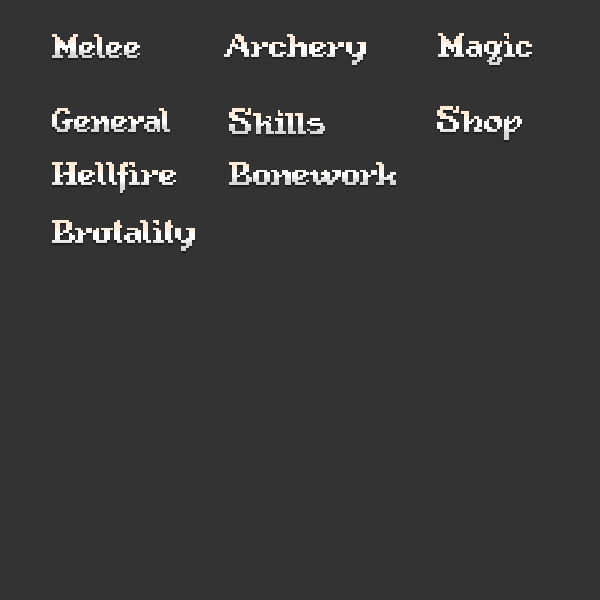
<style>
.page{position:relative;width:600px;height:600px;background:#333333}
.page>*{position:absolute;margin:0}
.t1{font:42.1px "InexpugnableExte";letter-spacing:-0.025em}
.t2{font:42.1px "InexpugnableExte";letter-spacing:-0.01em}
.t3{font:40.8px "InexpugnableExte";letter-spacing:-0.025em;color:#ffffff;scale:1.09 1}
.t4{font:40.8px "InexpugnableExte";letter-spacing:-0.005em;color:#ffffff;scale:1.09 1}
.t5{font:42.1px "InexpugnableExte"}
.t6{font:50.5px "RhymeExtended";letter-spacing:-0.01em;color:#ffffff}
.t7{font:42.1px "RhymeExtended";letter-spacing:-0.025em;color:#ffffff}
.t8{font:42.1px "RhymeExtended";letter-spacing:-0.005em;color:#ffffff}
.t9{font:42.1px "RhymeExtended";letter-spacing:-0.01em;color:#ffffff}
.t10{font:40.8px "InexpugnableExte";letter-spacing:-0.025em;scale:1.09 1}
</style>
<div class="page">
<p class="t1" style="left:52px;top:34px;width:88px;height:24px">Mel<span class="t2">e</span>e</p>
<p class="t3" style="left:224px;top:34px;width:142px;height:31px">Arc<span class="t4">h</span>e<span class="t4">r</span>y</p>
<p class="t2" style="left:438px;top:33px;width:94px;height:32px">M<span class="t5">a</span>gic</p>
<p class="t1" style="left:52px;top:108px;width:118px;height:24px">General</p>
<p class="t6" style="left:437px;top:106px;width:85px;height:34px">S<span class="t7">h</span><span class="t8">o</span><span class="t9">p</span></p>
<p class="t3" style="left:52px;top:162px;width:124px;height:31px">Hellfire</p>
<p class="t10" style="left:229px;top:162px;width:167px;height:23px">Bonework</p>
<p class="t3" style="left:52px;top:220px;width:143px;height:31px">Brutality</p>
</div>
